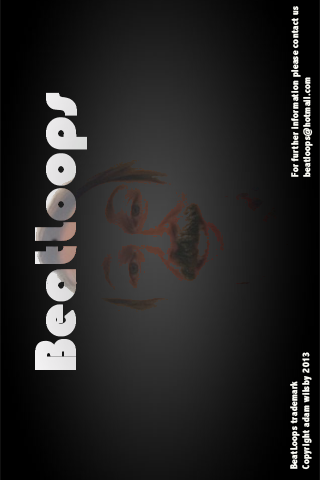
<style>
.page{position:relative;width:320px;height:480px}
.page>*{position:absolute;margin:0}
.t1{font:10px "AbadiMT-CondensedExtraBold";color:#fafaf4;font-weight:bold}
</style>
<div class="page">
<p class="t1" style="left:291px;top:6px;width:22px;height:171px;rotate:-90deg">For further information please contact us <br>beatloops@hotmail.com</p>
<p class="t1" style="left:290px;top:352px;width:22px;height:118px;rotate:-90deg">BeatLoops trademark<br>Copyright adam wilsby 2013</p>
</div>
